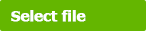
<style>
.page{position:relative;width:146px;height:31px;background:#64b600}
.page>*{position:absolute;margin:0}
.t1{font:14px "Verdana-Bold";letter-spacing:-0.046em;color:#ffffff;font-weight:bold}
</style>
<div class="page">
<p class="t1" style="left:11px;top:10px;width:75px;height:12px">Select file</p>
</div>
